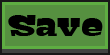
<style>
.page{position:relative;width:110px;height:55px;background:#569040}
.page>*{position:absolute;margin:0}
.t1{font:33px "Bigfish-Black";color:#000000}
</style>
<div class="page">
<p class="t1" style="left:8px;top:15px;width:95px;height:21px">Save</p>
</div>
